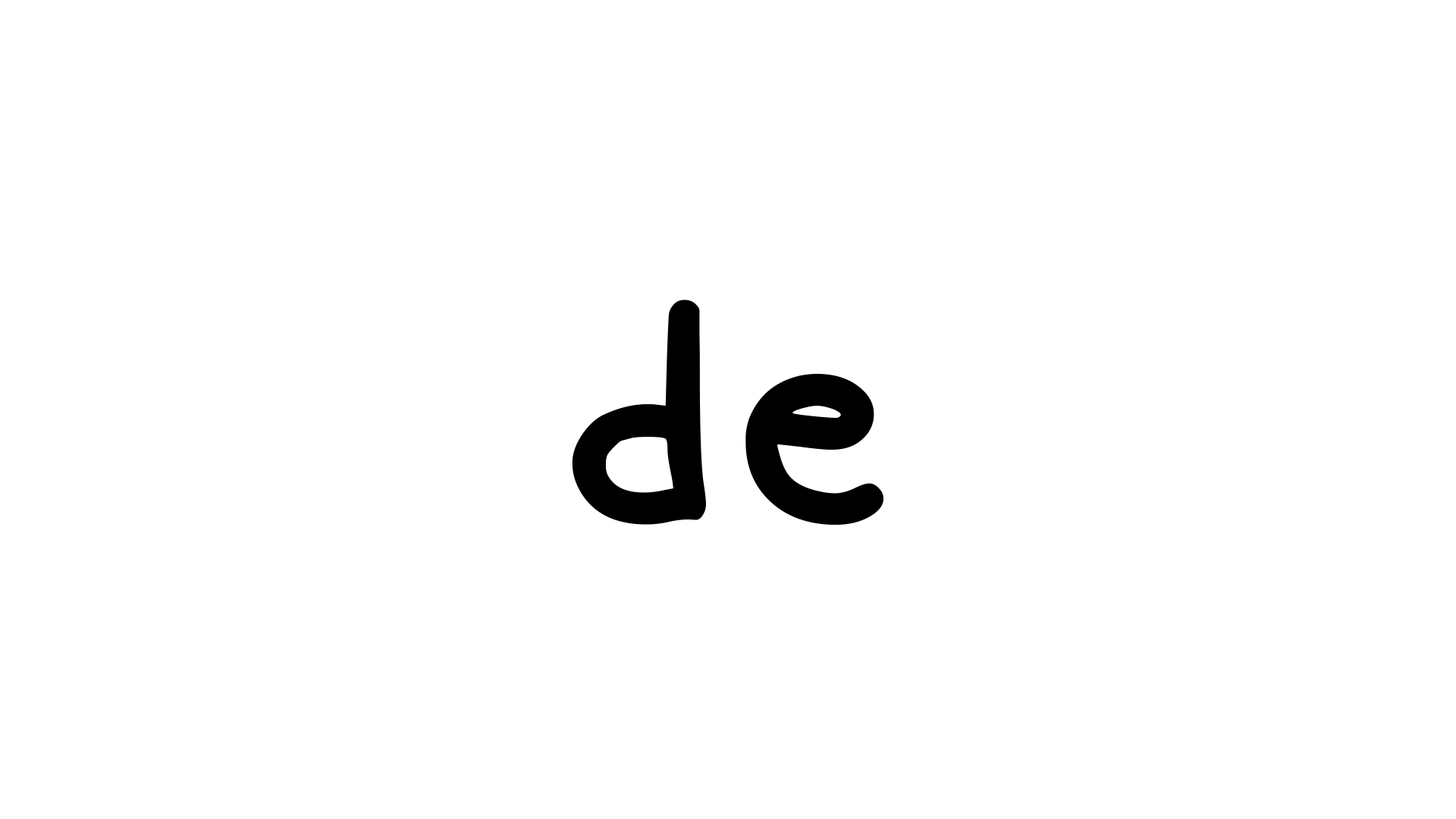
<style>
.page{position:relative;width:1456px;height:819px;background:#ffffff}
.page>*{position:absolute;margin:0}
.t1{font:379.2px "Brutal_bounce-Regular";color:#000000}
</style>
<div class="page">
<p class="t1" style="left:572px;top:300px;width:311px;height:225px">de</p>
</div>
